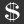
<style>
.page{position:relative;width:24px;height:24px;background:#333333}
.page>*{position:absolute;margin:0}
.t1{font:25px "EngraversMT";color:#ffffff}
</style>
<div class="page">
<p class="t1" style="left:5px;top:2px;width:15px;height:20px">$</p>
</div>
